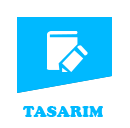
<style>
.page{position:relative;width:130px;height:128px;background:#ffffff}
.page>*{position:absolute;margin:0}
.t1{font:16px "CooperBlack";color:#00b9ff}
</style>
<div class="page">
<p class="t1" style="left:23px;top:106px;width:80px;height:11px">TASARIM</p>
</div>
